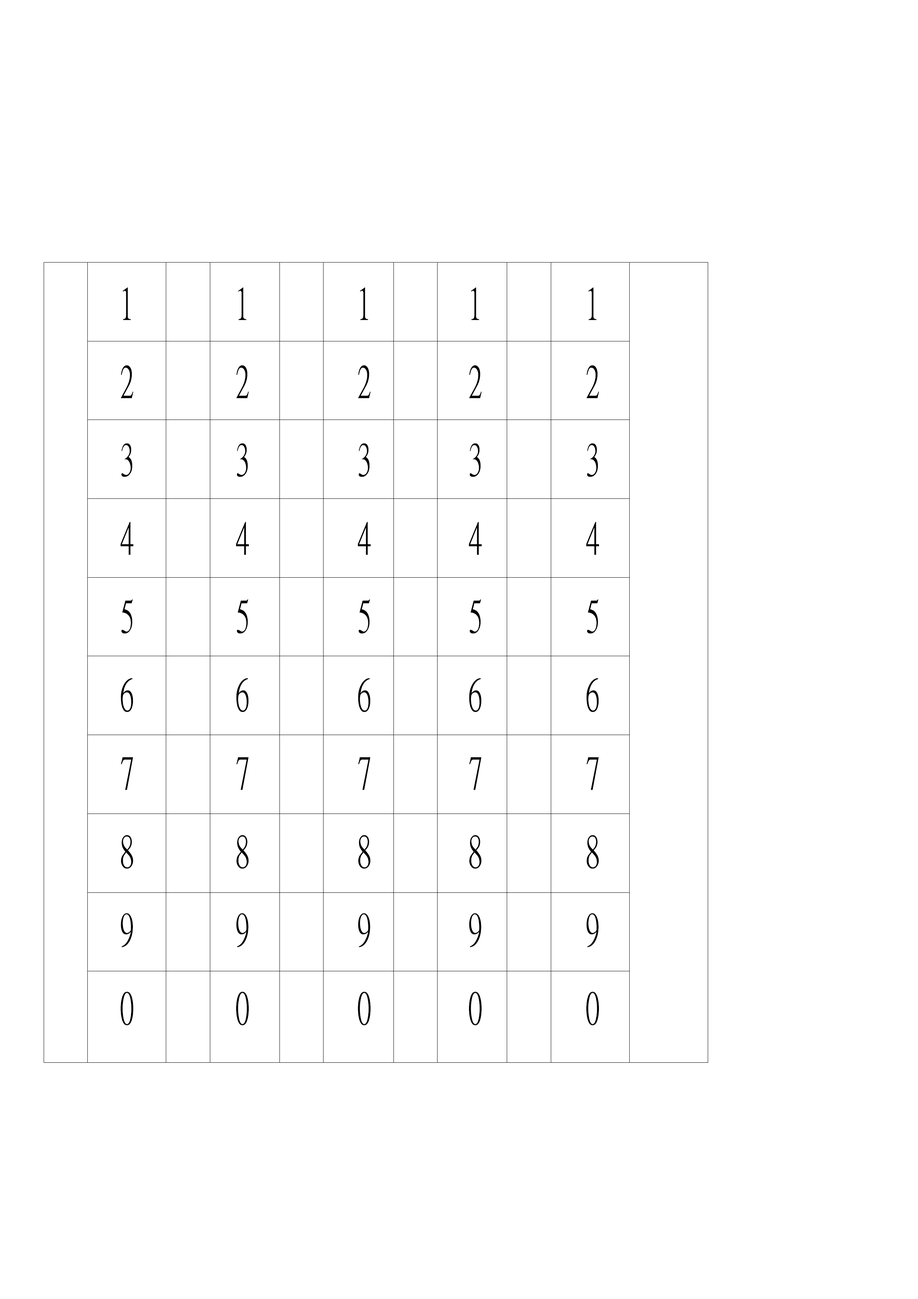
<style>
.page{position:relative;width:918px;height:1299px;background:#ffffff}
.page>*{position:absolute;margin:0}
.t1{font:44.7px "MingLiU";color:#000000;scale:0.66 1}
</style>
<div class="page">
<p class="t1" style="left:120px;top:287px;width:14px;height:738px">1<br>2<br>3<br>4<br>5<br>6<br>7<br>8<br>9<br>0</p>
<p class="t1" style="left:236px;top:287px;width:13px;height:738px">1<br>2<br>3<br>4<br>5<br>6<br>7<br>8<br>9<br>0</p>
<p class="t1" style="left:358px;top:287px;width:13px;height:738px">1<br>2<br>3<br>4<br>5<br>6<br>7<br>8<br>9<br>0</p>
<p class="t1" style="left:469px;top:287px;width:13px;height:738px">1<br>2<br>3<br>4<br>5<br>6<br>7<br>8<br>9<br>0</p>
<p class="t1" style="left:586px;top:287px;width:13px;height:738px">1<br>2<br>3<br>4<br>5<br>6<br>7<br>8<br>9<br>0</p>
</div>
